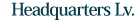
<style>
.page{position:relative;width:134px;height:20px;background:#ffffff}
.page>*{position:absolute;margin:0}
.t1{font:18px "HeiseiMinStd-W7";letter-spacing:-0.04em;color:#073c4d}
</style>
<div class="page">
<p class="t1" style="left:11px;top:2px;width:123px;height:18px">Headquarters Lv.</p>
</div>
